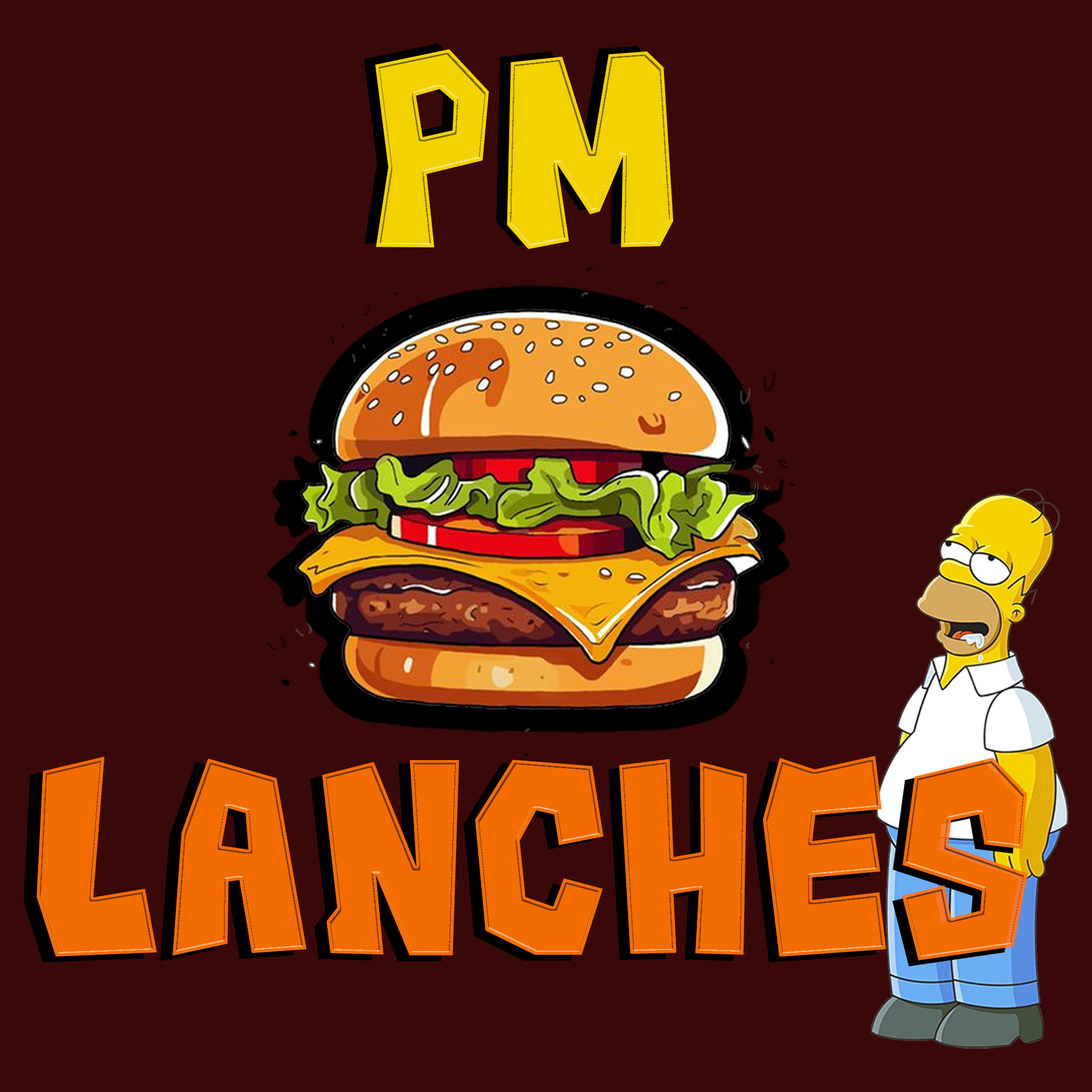
<style>
.page{position:relative;width:1092px;height:1092px;background:#390808}
.page>*{position:absolute;margin:0}
.t1{font:250.5px/238.9px "Rocks__G";letter-spacing:0.006em}
.t2{font:247.3px/235.8px "Rocks__G";letter-spacing:0.006em;color:#ff7200}
.t3{font:247.3px/235.8px "Rocks__G";letter-spacing:0.006em;color:#ffffff}
.t4{font:247.3px/235.8px "Rocks__G";letter-spacing:0.006em;color:#ffde00}
</style>
<div class="page">
<p class="t1" style="left:23px;top:43px;width:996px;height:923px">PM<br><br><br>LANCHES</p>
<p class="t2" style="left:37px;top:49px;width:991px;height:911px"><span class="t3">      </span><span class="t4">PM<br><br><br></span>LANCHES</p>
</div>
